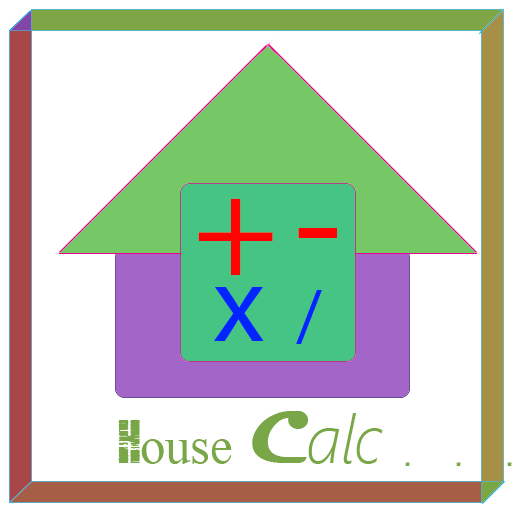
<style>
.page{position:relative;width:512px;height:512px;background:#ffffff}
.page>*{position:absolute;margin:0}
.t1{font:75.6px "MicrosoftHimalaya";color:#79a646}
.t2{font:75.6px "MenthaRapture";color:#79a646}
.t3{font:75.6px "Magneto-Bold";color:#79a646}
.t4{font:66.7px "SegoeUI-LightItalic";color:#79a646}
.t5{font:75.6px "Minisystem-Regular";color:#79a646}
</style>
<div class="page">
<p class="t1" style="left:118px;top:411px;width:394px;height:55px"><span class="t2">H</span>ouse <span class="t3">C</span><span class="t4">alc</span><span class="t5">...</span></p>
</div>
